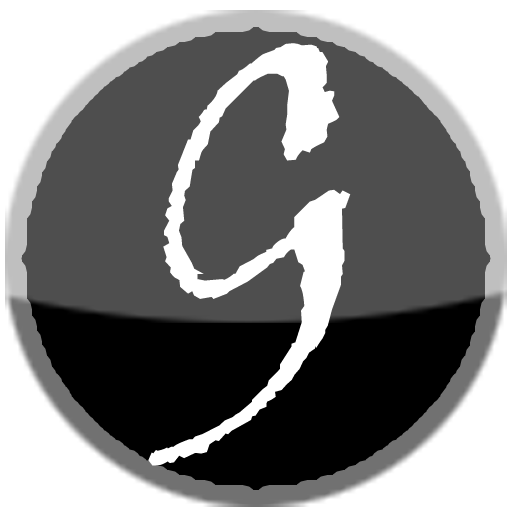
<style>
.page{position:relative;width:512px;height:512px;background:#4e4e4e}
.page>*{position:absolute;margin:0}
.t1{font:373.8px "VinerHandITC";color:#ffffff}
</style>
<div class="page">
<p class="t1" style="left:148px;top:43px;width:203px;height:423px">G</p>
</div>
